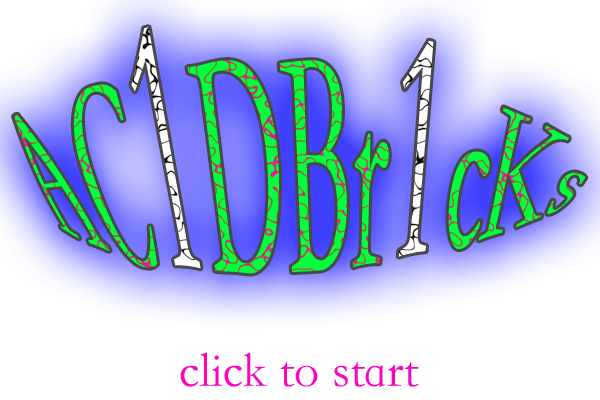
<style>
.page{position:relative;width:600px;height:400px;background:#ffffff}
.page>*{position:absolute;margin:0}
.t1{font:100px "STKaiti"}
.t2{font:120px "STKaiti"}
.t3{font:50px "STKaiti";color:#ff00c0}
</style>
<div class="page">
<p class="t1" style="left:14px;top:27px;width:572px;height:247px">AC<span class="t2">1</span>DBr<span class="t2">1</span>cKs</p>
<p class="t3" style="left:180px;top:352px;width:239px;height:35px">click to start</p>
</div>
